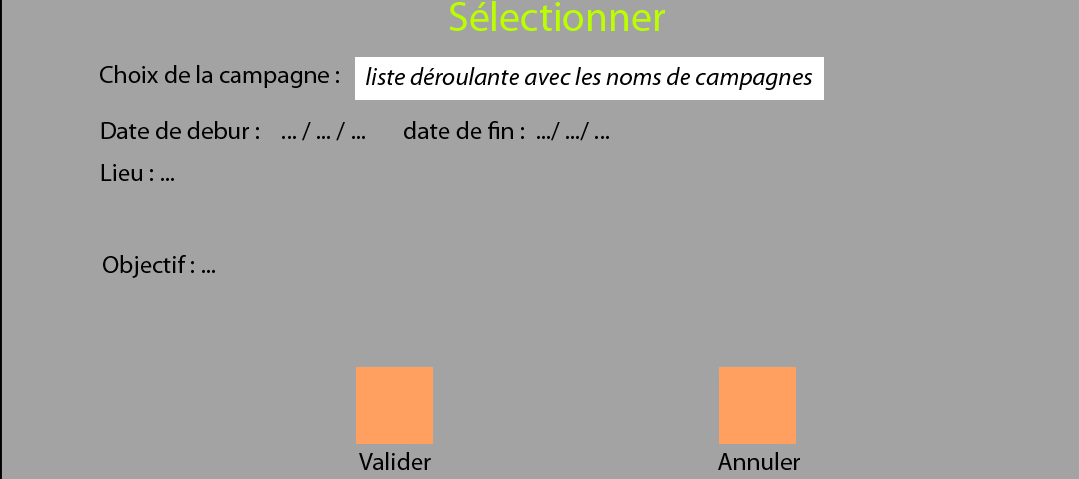
<style>
.page{position:relative;width:1079px;height:479px;background:#a3a3a3}
.page>*{position:absolute;margin:0}
.t1{font:41.7px "MyriadPro-Regular";color:#baff00}
.t2{font:25px "MyriadPro-Regular";color:#000000}
.t3{font:25px "MyriadPro-It";color:#000000}
</style>
<div class="page">
<p class="t1" style="left:449px;top:1px;width:216px;height:30px">Sélectionner</p>
<p class="t2" style="left:100px;top:65px;width:239px;height:23px">Choix de la campagne :</p>
<p class="t3" style="left:366px;top:67px;width:447px;height:23px">liste déroulante avec les noms de campagnes</p>
<p class="t2" style="left:101px;top:121px;width:508px;height:20px">Date de debur :    ... / ... / ...       date de fin :  .../ .../ ...</p>
<p class="t2" style="left:101px;top:164px;width:73px;height:17px">Lieu : ...</p>
<p class="t2" style="left:103px;top:255px;width:112px;height:23px">Objectif : ...</p>
<p class="t2" style="left:359px;top:452px;width:72px;height:18px">Valider</p>
<p class="t2" style="left:718px;top:452px;width:82px;height:18px">Annuler</p>
</div>
